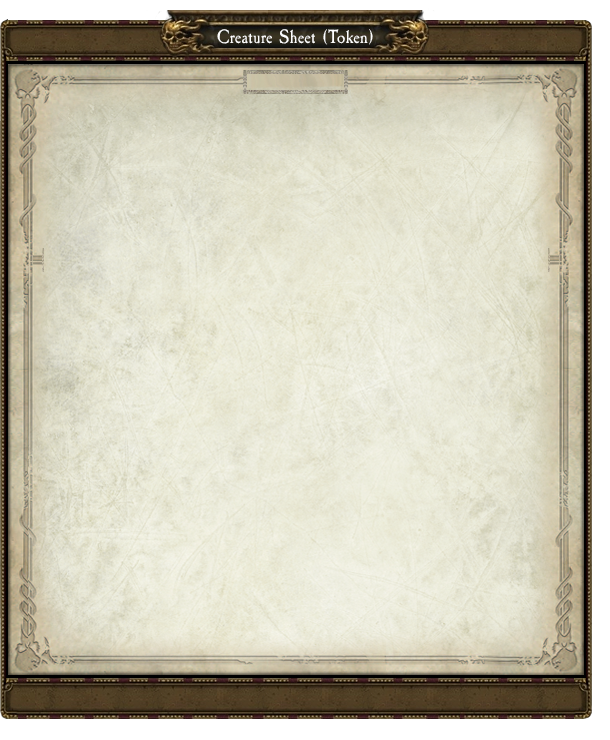
<style>
.page{position:relative;width:610px;height:740px}
.page>*{position:absolute;margin:0}
.t1{font:20px "CaslonAntique";color:#fefefe}
</style>
<div class="page">
<p class="t1" style="left:217px;top:29px;width:156px;height:16px">Creature Sheet (Token)</p>
</div>
